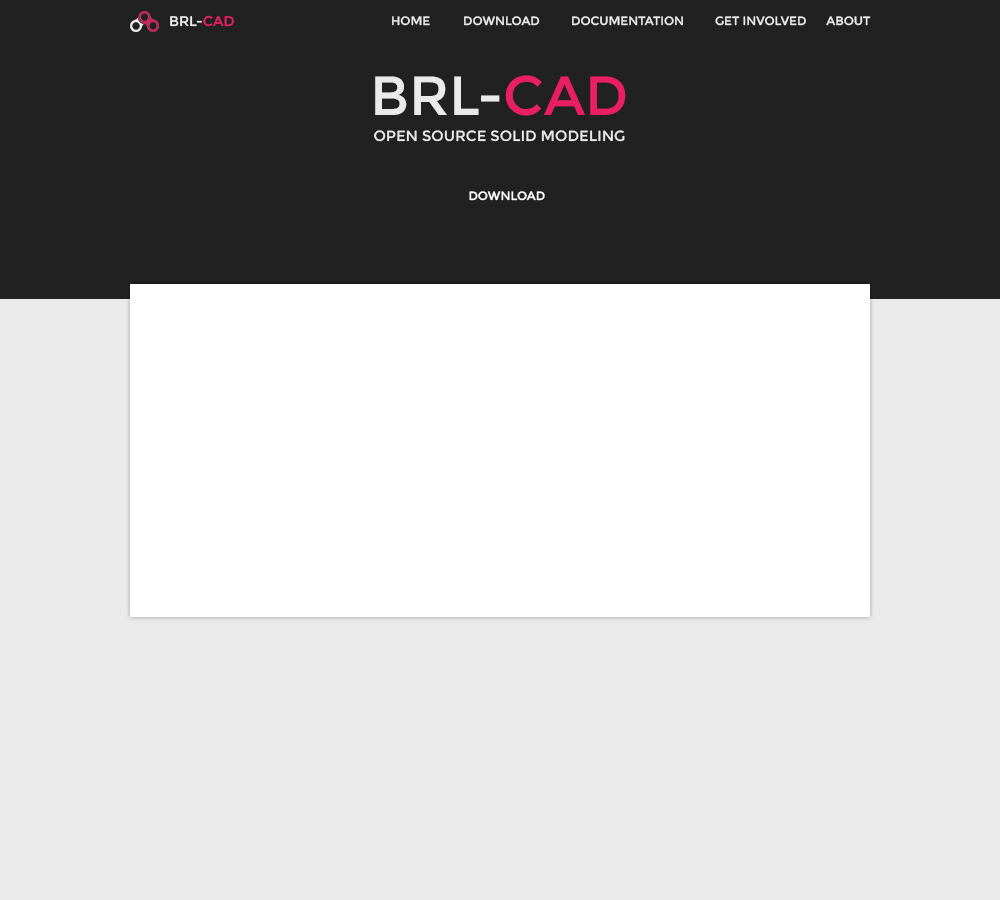
<style>
.page{position:relative;width:1000px;height:900px;background:#eaeaea}
.page>*{position:absolute;margin:0}
.t1{font:14px "Montserrat-Regular";color:#eaeaea}
.t2{font:14px "Montserrat-Regular";color:#e91e63}
.t3{font:12px "Montserrat-Regular";color:#eaeaea}
.t4{font:55.3px "Montserrat-Regular";color:#eaeaea}
.t5{font:55.3px "Montserrat-Regular";color:#e91e63}
.t6{font:14.8px "Montserrat-Regular";color:#eaeaea}
.t7{font:12px "Montserrat-Regular";color:#ffffff}
</style>
<div class="page">
<p class="t1" style="left:170px;top:15px;width:64px;height:12px">BRL-<span class="t2">CAD</span></p>
<p class="t3" style="left:392px;top:16px;width:479px;height:10px">HOME DOWNLOAD DOCUMENTATION GET INVOLVED  ABOUT</p>
<p class="t4" style="left:375px;top:75px;width:251px;height:41px">BRL-<span class="t5">CAD</span></p>
<p class="t6" style="left:374px;top:130px;width:251px;height:12px">OPEN SOURCE SOLID MODELING</p>
<p class="t7" style="left:469px;top:191px;width:76px;height:10px">DOWNLOAD</p>
</div>
